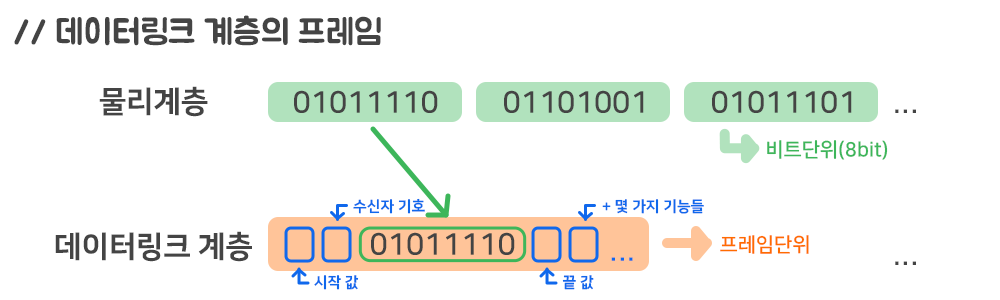
<style>
.page{position:relative;width:1000px;height:300px;background:#ffffff}
.page>*{position:absolute;margin:0}
.t1{font:35px "BMJUA";color:#444444}
.t2{font:30px "NanumSquareEB";color:#444444}
.t3{font:30px "NanumSquareB";color:#444444}
.t4{font:20px "NanumSquareB";color:#3db65a}
.t5{font:15px "NanumSquareEB";color:#1068ec}
.t6{font:20px "NanumSquareB";color:#ff6c00}
.t7{font:25px "NanumSquareEB";color:#1068ec}
</style>
<div class="page">
<p class="t1" style="left:14px;top:15px;width:367px;height:31px">// 데이터링크 계층의 프레임</p>
<p class="t2" style="left:99px;top:86px;width:109px;height:31px">물리계층</p>
<p class="t3" style="left:294px;top:90px;width:144px;height:23px">01011110</p>
<p class="t3" style="left:504px;top:90px;width:140px;height:23px">01101001</p>
<p class="t3" style="left:712px;top:90px;width:140px;height:23px">01011101</p>
<p class="t3" style="left:895px;top:109px;width:21px;height:4px">...</p>
<p class="t4" style="left:767px;top:140px;width:121px;height:20px">비트단위(8bit)</p>
<p class="t5" style="left:353px;top:198px;width:72px;height:16px">수신자 기호</p>
<p class="t5" style="left:602px;top:199px;width:102px;height:15px">+ 몇 가지 기능들</p>
<p class="t2" style="left:55px;top:231px;width:197px;height:31px">데이터링크 계층</p>
<p class="t3" style="left:371px;top:232px;width:144px;height:23px">01011110</p>
<p class="t6" style="left:720px;top:235px;width:89px;height:19px">프레임단위</p>
<p class="t7" style="left:611px;top:257px;width:22px;height:4px">...</p>
<p class="t3" style="left:895px;top:261px;width:21px;height:4px">...</p>
<p class="t5" style="left:314px;top:275px;width:45px;height:15px">시작 값</p>
<p class="t5" style="left:562px;top:275px;width:32px;height:15px">끝 값</p>
</div>
